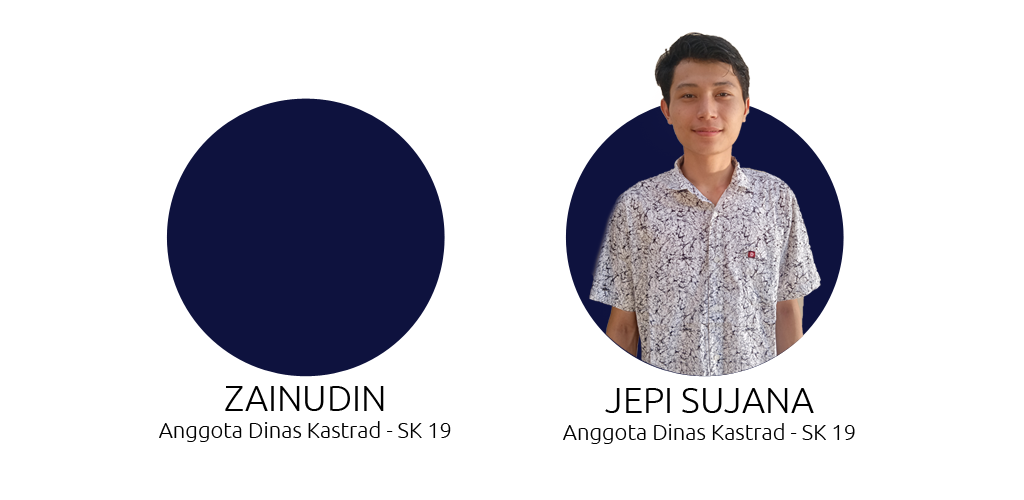
<style>
.page{position:relative;width:1024px;height:500px;background:#ffffff}
.page>*{position:absolute;margin:0}
.t1{font:22px "Ubuntu-Light";color:#000000}
.t2{font:36px "Ubuntu-Light";color:#000000}
</style>
<div class="page">
<p class="t1" style="left:159px;top:386px;width:292px;height:56px;text-align:center"><span class="t2">ZAINUDIN<br></span>Anggota Dinas Kastrad - SK 19</p>
<p class="t1" style="left:563px;top:388px;width:292px;height:56px;text-align:center"><span class="t2">JEPI SUJANA<br></span>Anggota Dinas Kastrad - SK 19</p>
</div>
